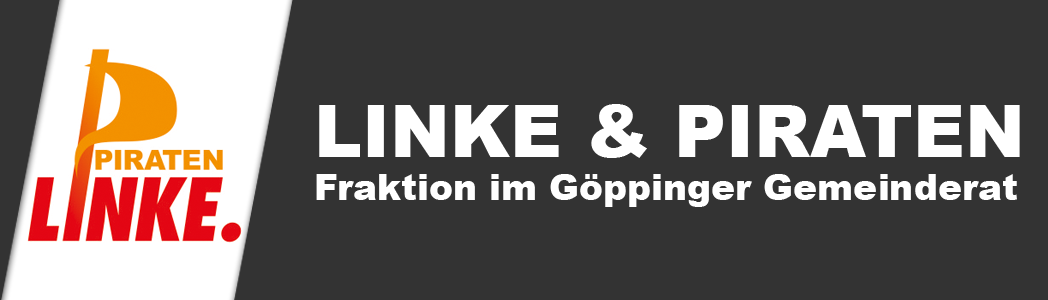
<style>
.page{position:relative;width:1048px;height:300px;background:#333333}
.page>*{position:absolute;margin:0}
.t1{font:36px "Arial-Black";color:#ffffff}
.t2{font:72px "Arial-Black";color:#ffffff}
</style>
<div class="page">
<p class="t1" style="left:316px;top:104px;width:704px;height:103px"><span class="t2">LINKE &amp; PIRATEN<br></span>Fraktion im Göppinger Gemeinderat</p>
</div>
